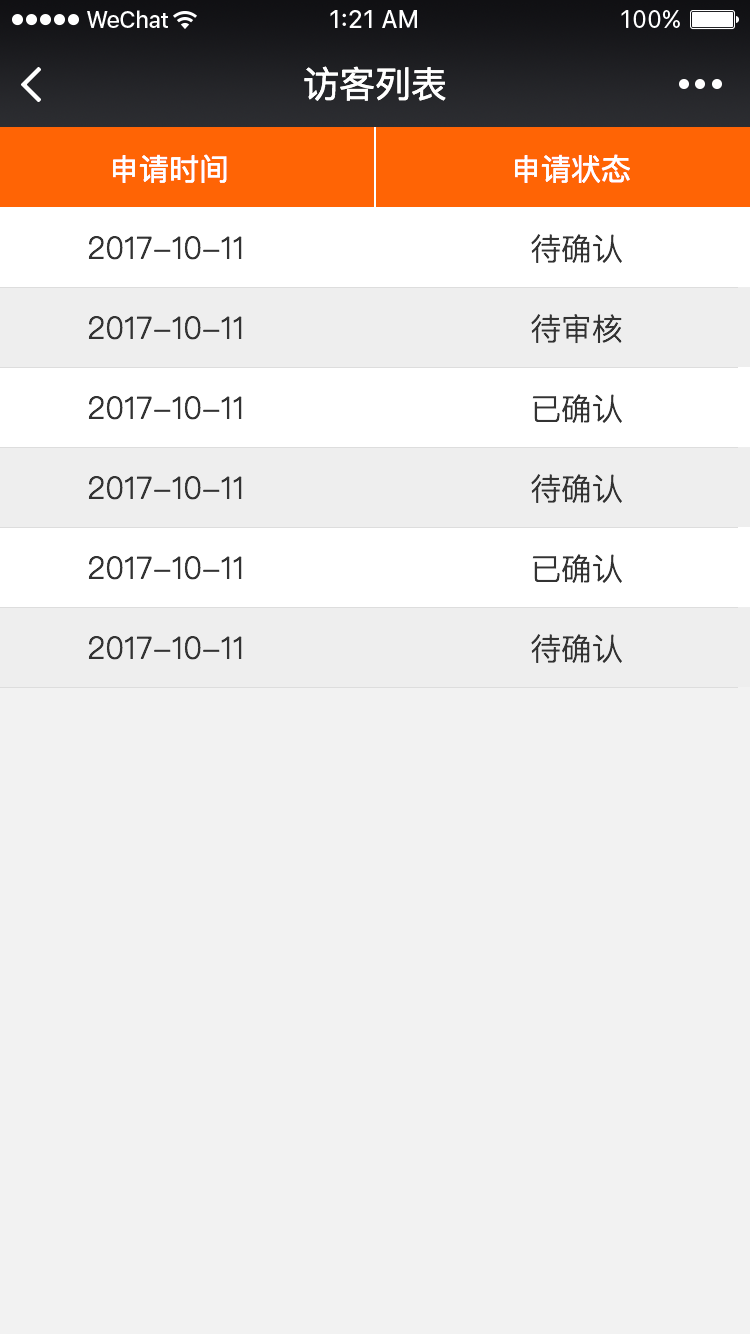
<style>
.page{position:relative;width:750px;height:1334px;background:#f2f2f2}
.page>*{position:absolute;margin:0}
.t1{font:36px "PingFangSC-Regular";color:#ffffff}
.t2{font:30px "PingFangSC-Regular";color:#ffffff}
.t3{font:30.7px "PingFangSC-Light";color:#333333}
</style>
<div class="page">
<p class="t1" style="left:304px;top:66px;width:142px;height:35px">访客列表</p>
<p class="t2" style="left:113px;top:154px;width:114px;height:29px">申请时间</p>
<p class="t2" style="left:515px;top:154px;width:115px;height:29px">申请状态</p>
<p class="t3" style="left:88px;top:236px;width:154px;height:24px">2017-10-11</p>
<p class="t3" style="left:531px;top:234px;width:91px;height:29px">待确认</p>
<p class="t3" style="left:88px;top:316px;width:154px;height:24px">2017-10-11</p>
<p class="t3" style="left:531px;top:314px;width:91px;height:30px">待审核</p>
<p class="t3" style="left:88px;top:396px;width:154px;height:24px">2017-10-11</p>
<p class="t3" style="left:532px;top:394px;width:90px;height:29px">已确认</p>
<p class="t3" style="left:88px;top:476px;width:154px;height:24px">2017-10-11</p>
<p class="t3" style="left:531px;top:474px;width:91px;height:29px">待确认</p>
<p class="t3" style="left:88px;top:556px;width:154px;height:24px">2017-10-11</p>
<p class="t3" style="left:532px;top:554px;width:90px;height:29px">已确认</p>
<p class="t3" style="left:88px;top:636px;width:154px;height:24px">2017-10-11</p>
<p class="t3" style="left:531px;top:634px;width:91px;height:29px">待确认</p>
</div>
